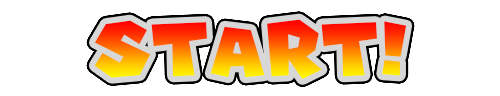
<style>
.page{position:relative;width:500px;height:96px;background:#ffffff}
.page>*{position:absolute;margin:0}
.t1{font:106.4px "SuperMario"}
</style>
<div class="page">
<p class="t1" style="left:94px;top:19px;width:313px;height:60px">START!</p>
</div>
